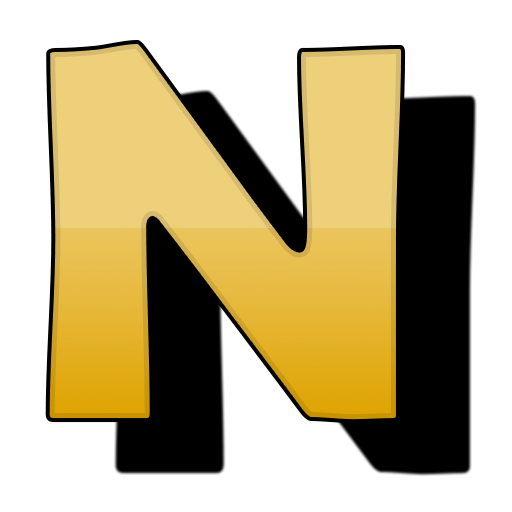
<style>
.page{position:relative;width:512px;height:512px;background:#ffffff}
.page>*{position:absolute;margin:0}
.t1{font:550.1px "BerlinSansFBDemi-Bold"}
</style>
<div class="page">
<p class="t1" style="left:45px;top:40px;width:361px;height:384px">N</p>
</div>
